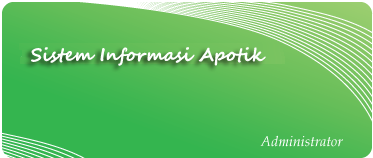
<style>
.page{position:relative;width:373px;height:158px}
.page>*{position:absolute;margin:0}
.t1{font:18px "SegoeScript-Bold";color:#fafefd}
</style>
<div class="page">
<p class="t1" style="left:31px;top:47px;width:235px;height:19px">Sistem Informasi Apotik</p>
</div>
